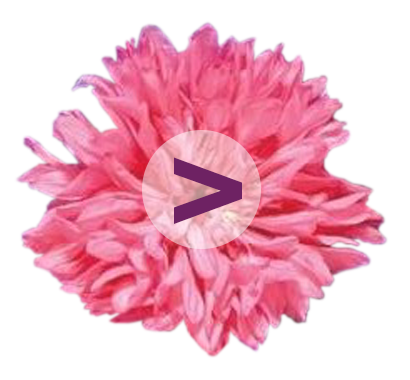
<style>
.page{position:relative;width:410px;height:380px;background:#ffffff}
.page>*{position:absolute;margin:0}
.t1{font:208.8px "BebasNeue";color:#6e2263}
</style>
<div class="page">
<p class="t1" style="left:174px;top:157px;width:68px;height:67px">&gt;</p>
</div>
